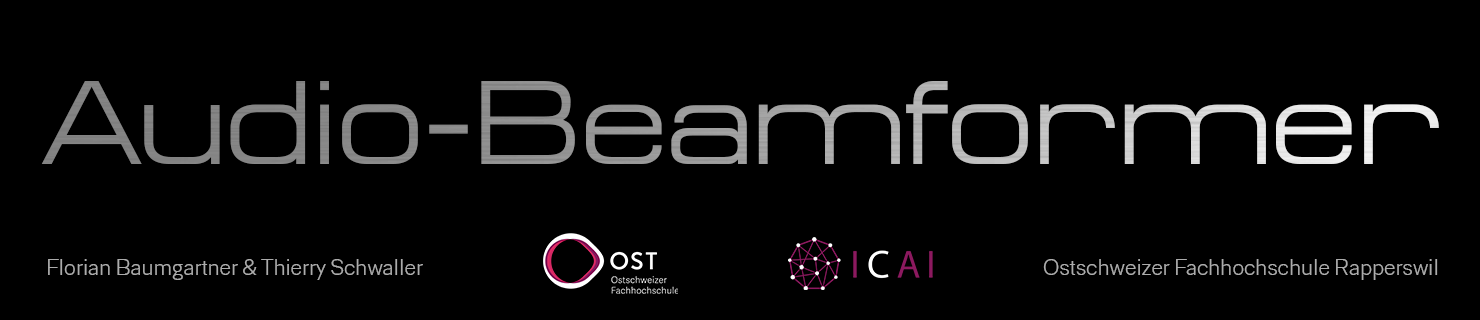
<style>
.page{position:relative;width:1480px;height:320px;background:#000000}
.page>*{position:absolute;margin:0}
.t1{font:120px "MicroExtendFLF"}
.t2{font:24px "Berka-Light";color:#acacac}
</style>
<div class="page">
<p class="t1" style="left:41px;top:81px;width:1398px;height:83px">Audio-Beamformer</p>
<p class="t2" style="left:48px;top:259px;width:375px;height:21px">Florian Baumgartner &amp; Thierry Schwaller</p>
<p class="t2" style="left:1043px;top:259px;width:395px;height:21px">Ostschweizer Fachhochschule Rapperswil</p>
</div>
